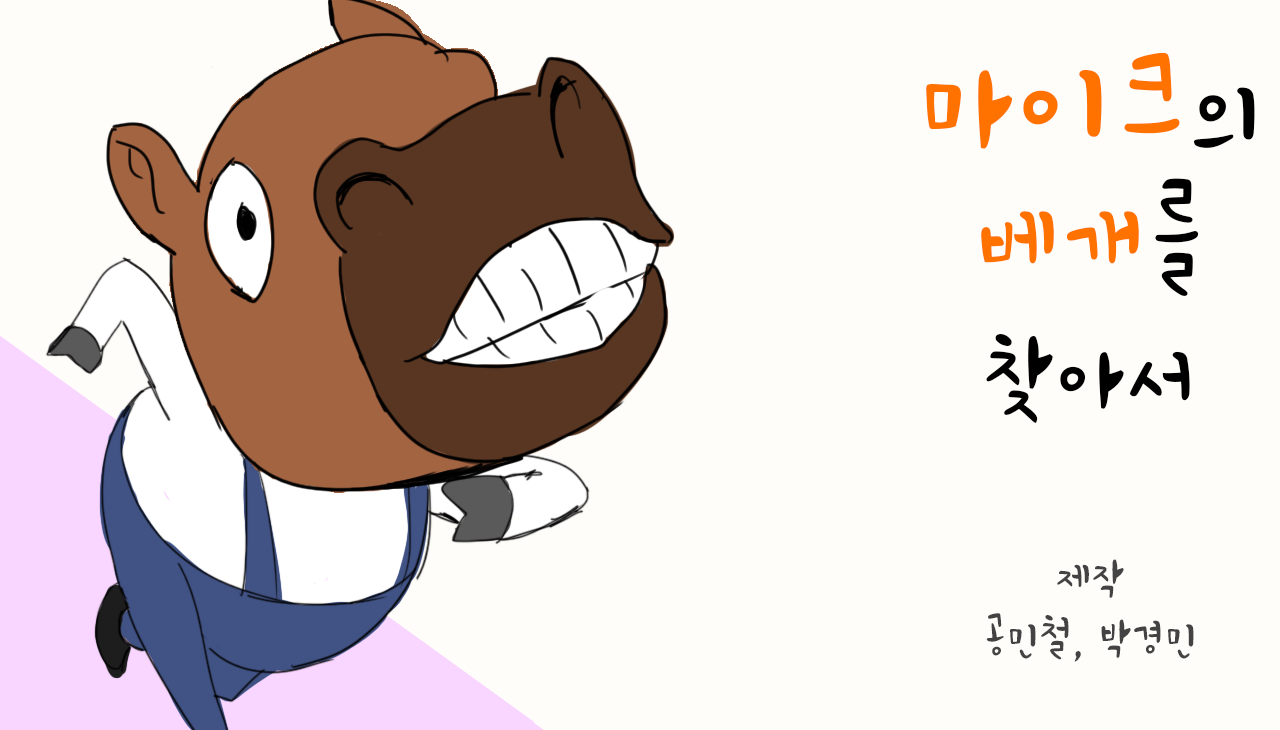
<style>
.page{position:relative;width:1280px;height:730px;background:#fffdf9}
.page>*{position:absolute;margin:0}
.t1{font:180px/160px "TTSigolbapsangR";color:#ff7200}
.t2{font:140px/160px "TTSigolbapsangR";color:#000000}
.t3{font:140px/140px "TTSigolbapsangR";color:#ff7200}
.t4{font:140px/140px "TTSigolbapsangR";color:#000000}
.t5{font:130px/140px "TTSigolbapsangR";color:#000000}
.t6{font:60px/60px "TTSigolbapsangR";color:#434343}
</style>
<div class="page">
<p class="t1" style="left:926px;top:52px;width:329px;height:371px;text-align:center">마이크<span class="t2">의<br></span><span class="t3">베개</span><span class="t4">를<br></span><span class="t5">찾아서</span></p>
<p class="t6" style="left:986px;top:559px;width:208px;height:103px;text-align:center">제작<br>공민철, 박경민</p>
</div>
